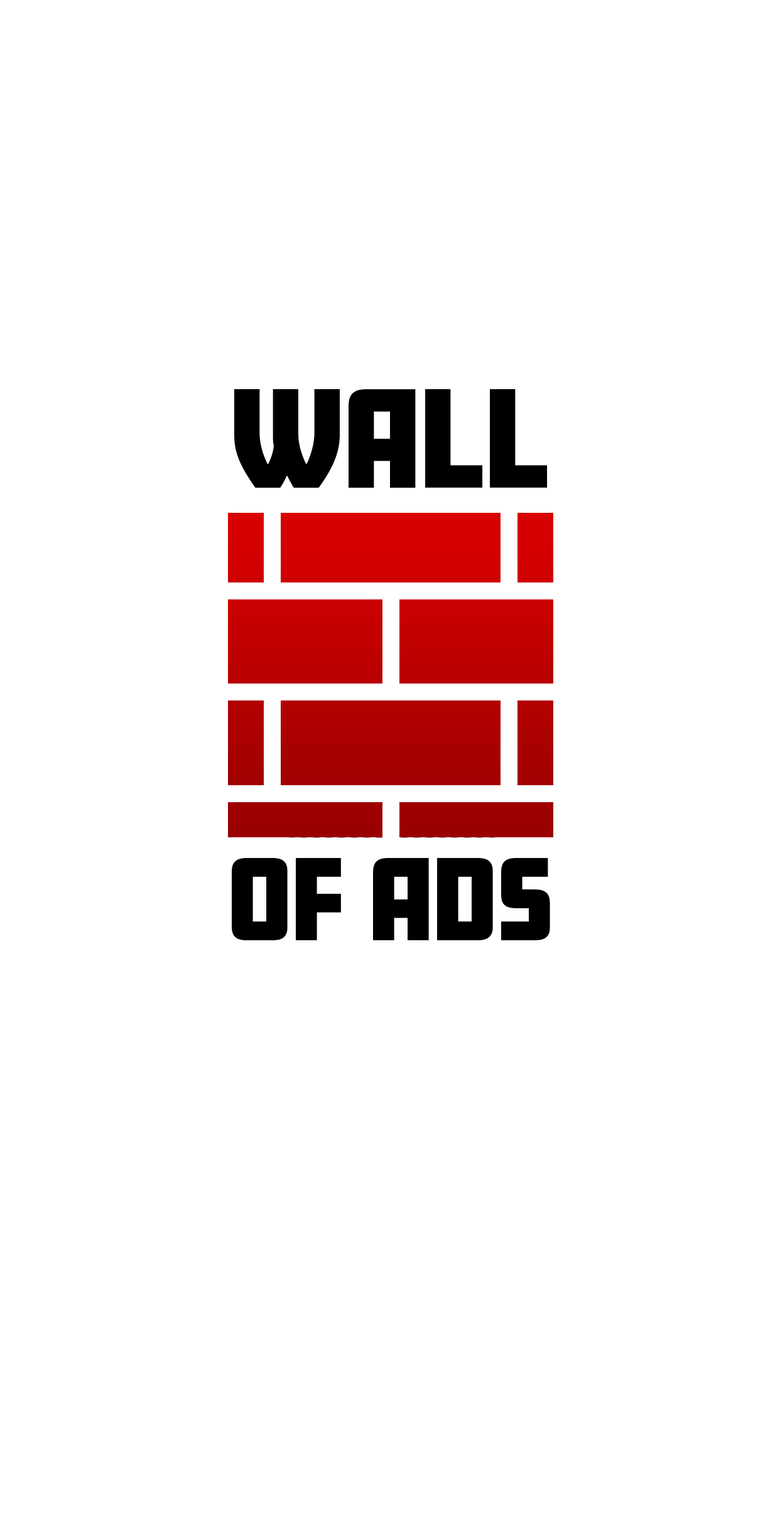
<style>
.page{position:relative;width:780px;height:1529px;background:#ffffff}
.page>*{position:absolute;margin:0}
.t1{font:123.1px "Amboy-Black";color:#000000}
.t2{font:102.5px "Amboy-Black";color:#000000}
</style>
<div class="page">
<p class="t1" style="left:234px;top:389px;width:313px;height:99px">WALL</p>
<p class="t2" style="left:232px;top:858px;width:318px;height:83px">OF ADS</p>
</div>
